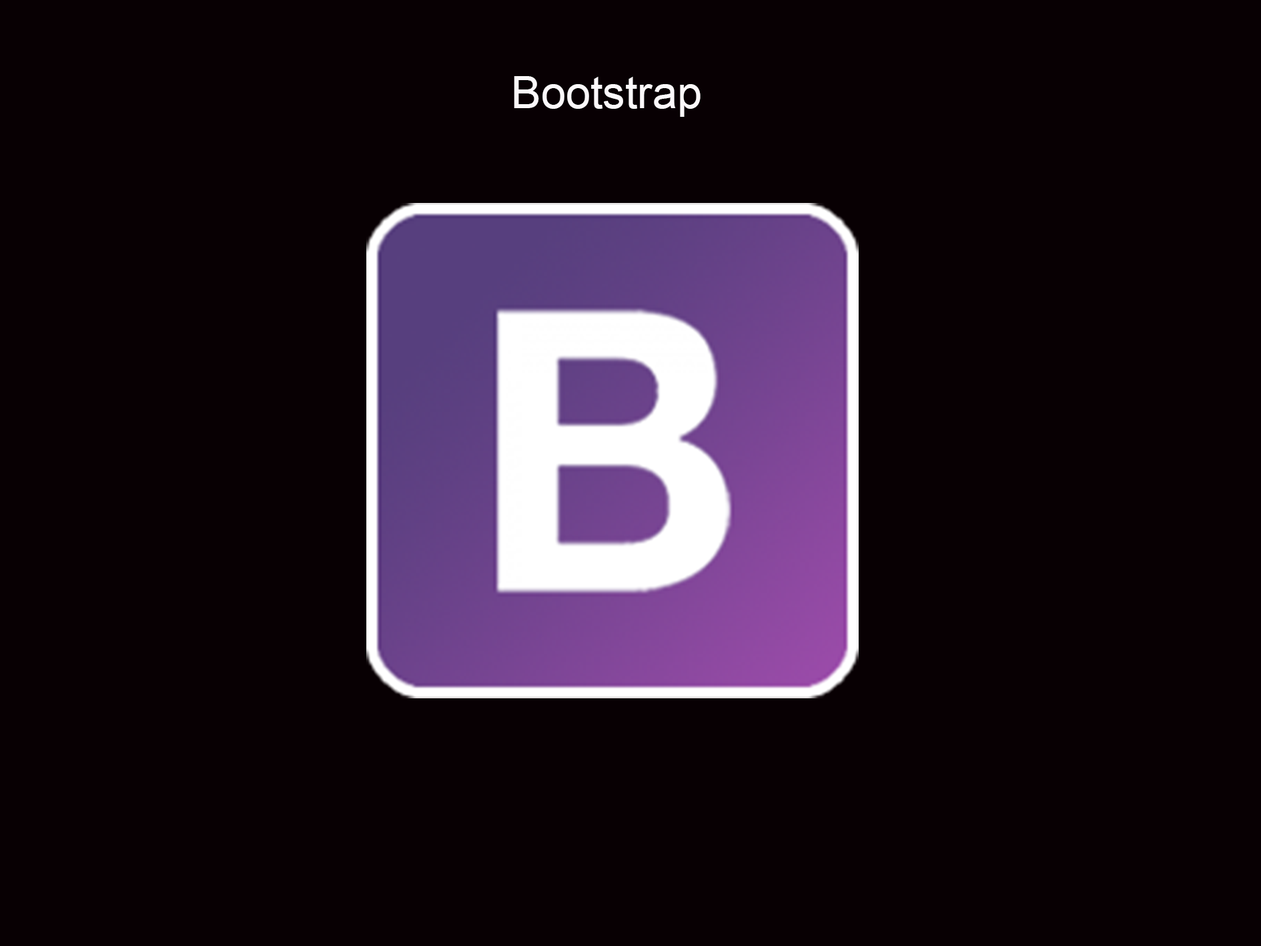
<style>
.page{position:relative;width:1261px;height:946px;background:#080003}
.page>*{position:absolute;margin:0}
.t1{font:44.5px "ArialMT";color:#fcf9fb}
</style>
<div class="page">
<p class="t1" style="left:514px;top:76px;width:187px;height:41px">Bootstrap</p>
</div>
